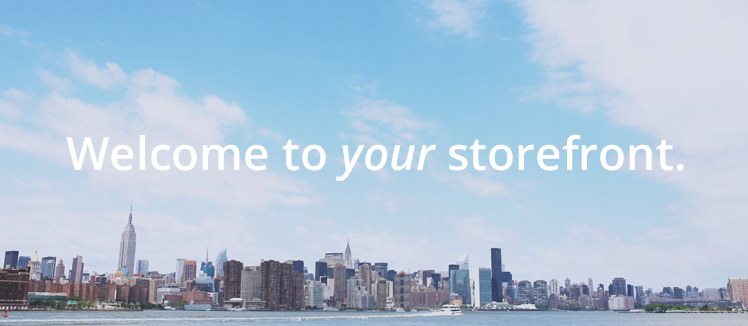
<style>
.page{position:relative;width:748px;height:326px}
.page>*{position:absolute;margin:0}
.t1{font:46px "OpenSans-Semibold";color:#ffffff}
.t2{font:46px "OpenSans-SemiboldItalic";color:#ffffff}
</style>
<div class="page">
<p class="t1" style="left:66px;top:134px;width:618px;height:47px">Welcome to <span class="t2">your</span> storefront.</p>
</div>
